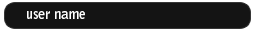
<style>
.page{position:relative;width:260px;height:30px;background:#141414}
.page>*{position:absolute;margin:0}
.t1{font:14.8px "BellGothicStd-Bold";color:#ffffff;scale:0.93 1}
</style>
<div class="page">
<p class="t1" style="left:27px;top:11px;width:58px;height:8px">user name</p>
</div>
